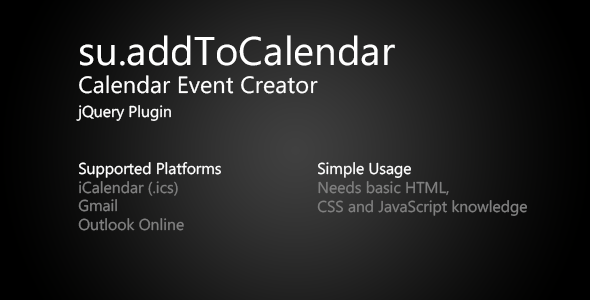
<style>
.page{position:relative;width:590px;height:300px}
.page>*{position:absolute;margin:0}
.t1{font:15.7px "SegoeWP";color:#808080}
.t2{font:40px/28px "SegoeWP";color:#ffffff}
.t3{font:23.6px/28px "SegoeWP";color:#ffffff}
.t4{font:15.7px/24px "SegoeWP";color:#ffffff}
.t5{font:15.7px "SegoeWP";color:#ffffff}
</style>
<div class="page">
<p class="t1" style="left:76px;top:35px;width:319px;height:196px"><span class="t2">su.addToCalendar<br></span><span class="t3">Calendar Event Creator<br></span><span class="t4">jQuery Plugin<br></span><span class="t5"><br><br>Supported Platforms<br></span>iCalendar (.ics) <br>Gmail<br>Outlook Online</p>
<p class="t1" style="left:317px;top:162px;width:210px;height:54px"><span class="t5">Simple Usage<br></span>Needs basic HTML,<br>CSS and JavaScript knowledge</p>
</div>
